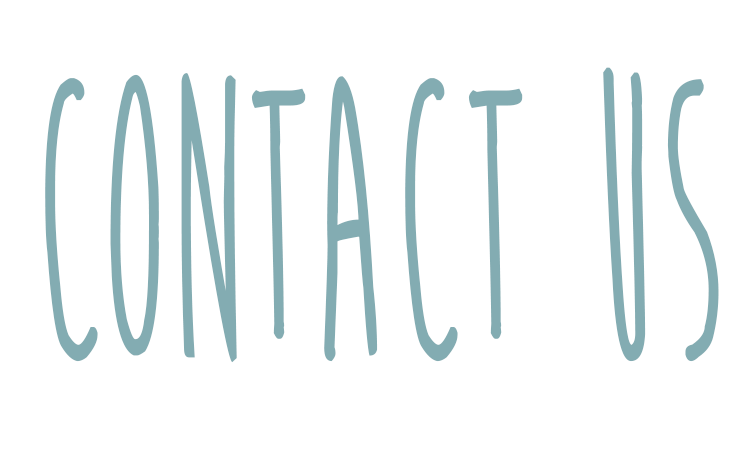
<style>
.page{position:relative;width:750px;height:450px;background:#ffffff}
.page>*{position:absolute;margin:0}
.t1{font:415.1px "MoonFlowerBold";color:#83acb2;scale:0.54 1}
</style>
<div class="page">
<p class="t1" style="left:45px;top:67px;width:674px;height:296px">Contact US</p>
</div>
